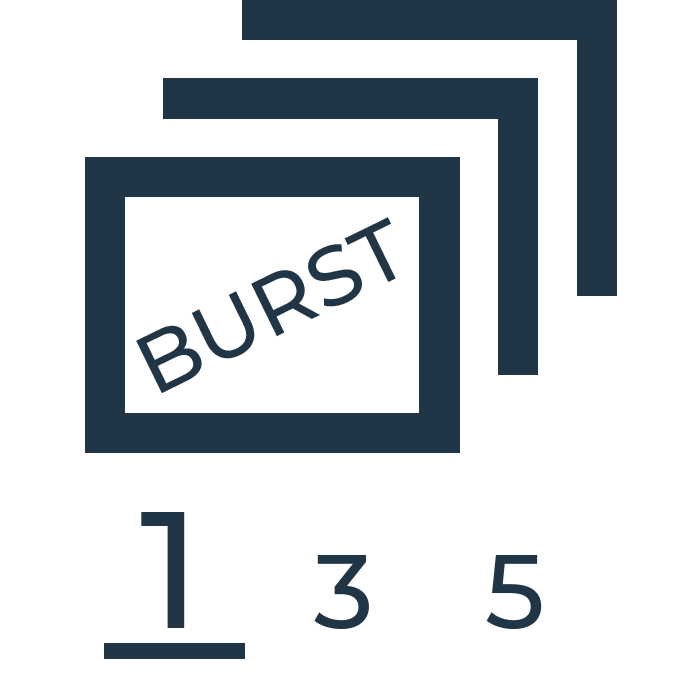
<style>
.page{position:relative;width:682px;height:682px;background:#ffffff}
.page>*{position:absolute;margin:0}
.t1{font:83.3px "Montserrat-Medium";color:#203545}
.t2{font:104.2px "Montserrat-Medium";color:#203545}
.t3{font:166.7px "Montserrat-Medium";color:#203545}
</style>
<div class="page">
<p class="t1" style="left:136px;top:217px;width:260px;height:177px;rotate:-26deg">BURST</p>
<p class="t2" style="left:141px;top:512px;width:401px;height:117px"><span class="t3">1     </span>3     5</p>
</div>
